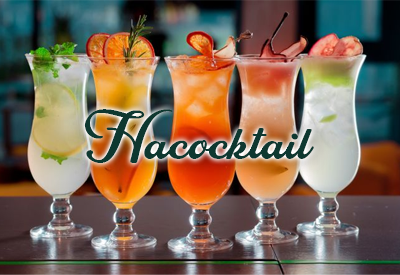
<style>
.page{position:relative;width:400px;height:275px}
.page>*{position:absolute;margin:0}
.t1{font:45.8px "CostaRicaPersonalUse";color:#0e3830}
</style>
<div class="page">
<p class="t1" style="left:84px;top:109px;width:230px;height:54px">Hacocktail</p>
</div>
